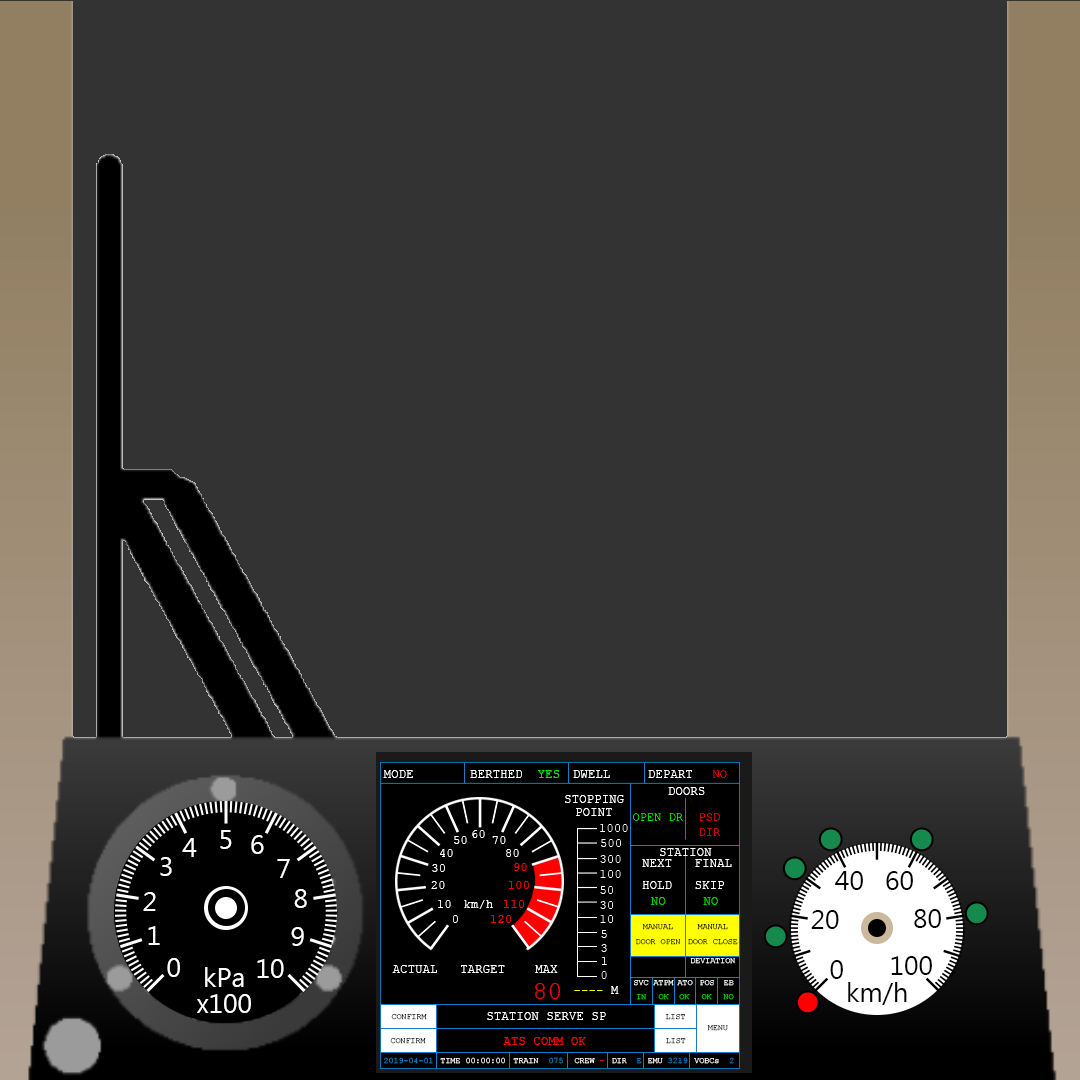
<style>
.page{position:relative;width:1080px;height:1080px;background:#333333}
.page>*{position:absolute;margin:0}
.t1{font:12.5px "CourierNewPSMT";color:#ffffff}
.t2{font:12.5px "CourierNewPSMT";color:#00ec00}
.t3{font:12.5px "CourierNewPSMT";color:#ff0000}
.t4{font:12.5px "CourierNewPSMT";color:#00d500}
.t5{font:8.3px "CourierNewPSMT"}
.t6{font:8.3px "CourierNewPSMT";color:#ffffff}
.t7{font:25px "CourierNewPSMT";color:#ff0000}
.t8{font:12.5px "CourierNewPSMT";color:#ffff00}
.t9{font:8.3px "CourierNewPSMT";color:#00d300}
.t10{font:8.3px "CourierNewPSMT";color:#000000}
.t11{font:8.3px "CourierNewPSMT";color:#1081c6}
.t12{font:8.3px "CourierNewPSMT";color:#ff0000}
</style>
<div class="page">
<p class="t1" style="left:383px;top:770px;width:30px;height:8px">MODE</p>
<p class="t1" style="left:470px;top:770px;width:89px;height:8px">BERTHED  <span class="t2">YES</span></p>
<p class="t1" style="left:573px;top:770px;width:37px;height:8px">DWELL</p>
<p class="t1" style="left:648px;top:770px;width:44px;height:8px">DEPART</p>
<p class="t1" style="left:565px;top:795px;width:59px;height:8px">STOPPING</p>
<p class="t1" style="left:668px;top:787px;width:37px;height:8px">DOORS</p>
<p class="t1" style="left:576px;top:808px;width:36px;height:8px">POINT</p>
<p class="t1" style="left:472px;top:830px;width:13px;height:8px">60</p>
<p class="t1" style="left:454px;top:836px;width:13px;height:8px">50</p>
<p class="t1" style="left:492px;top:836px;width:14px;height:8px">70</p>
<p class="t1" style="left:440px;top:849px;width:13px;height:8px">40</p>
<p class="t1" style="left:506px;top:849px;width:13px;height:8px">80</p>
<p class="t1" style="left:660px;top:848px;width:52px;height:8px">STATION</p>
<p class="t1" style="left:432px;top:864px;width:13px;height:8px">30</p>
<p class="t3" style="left:514px;top:863px;width:13px;height:8px">90</p>
<p class="t1" style="left:642px;top:859px;width:90px;height:30px">NEXT   FINAL<br>HOLD   SKIP</p>
<p class="t1" style="left:431px;top:881px;width:14px;height:8px">20</p>
<p class="t3" style="left:508px;top:881px;width:21px;height:8px">100</p>
<p class="t1" style="left:438px;top:900px;width:13px;height:8px">10</p>
<p class="t1" style="left:464px;top:900px;width:29px;height:9px">km/h</p>
<p class="t3" style="left:504px;top:900px;width:20px;height:8px">110</p>
<p class="t4" style="left:651px;top:897px;width:15px;height:8px">NO</p>
<p class="t4" style="left:703px;top:897px;width:15px;height:8px">NO</p>
<p class="t1" style="left:453px;top:915px;width:5px;height:8px">0</p>
<p class="t3" style="left:491px;top:915px;width:20px;height:8px">120</p>
<p class="t5" style="left:636px;top:924px;width:45px;height:21px;text-align:center">MANUAL<br>DOOR OPEN</p>
<p class="t5" style="left:688px;top:924px;width:50px;height:21px;text-align:center">MANUAL<br>DOOR CLOSE</p>
<p class="t1" style="left:392px;top:965px;width:166px;height:8px">ACTUAL   TARGET    MAX</p>
<p class="t6" style="left:690px;top:958px;width:45px;height:6px">DEVIATION</p>
<p class="t7" style="left:535px;top:983px;width:25px;height:16px">80</p>
<p class="t8" style="left:574px;top:986px;width:45px;height:8px">---- <span class="t1">M</span></p>
<p class="t6" style="left:634px;top:980px;width:15px;height:6px">SVC</p>
<p class="t6" style="left:653px;top:980px;width:21px;height:6px">ATPM</p>
<p class="t6" style="left:677px;top:980px;width:16px;height:6px">ATO</p>
<p class="t6" style="left:700px;top:980px;width:14px;height:6px">POS</p>
<p class="t5" style="left:724px;top:980px;width:10px;height:6px">EB</p>
<p class="t9" style="left:636px;top:994px;width:10px;height:6px">IN</p>
<p class="t9" style="left:658px;top:994px;width:11px;height:6px">OK</p>
<p class="t9" style="left:679px;top:994px;width:11px;height:6px">OK</p>
<p class="t9" style="left:701px;top:994px;width:11px;height:6px">OK</p>
<p class="t9" style="left:723px;top:994px;width:11px;height:6px">NO</p>
<p class="t5" style="left:391px;top:1014px;width:36px;height:6px">CONFIRM</p>
<p class="t1" style="left:487px;top:1012px;width:119px;height:8px">STATION SERVE SP</p>
<p class="t10" style="left:665px;top:1014px;width:20px;height:6px">LIST</p>
<p class="t5" style="left:707px;top:1025px;width:21px;height:6px">MENU</p>
<p class="t5" style="left:390px;top:1038px;width:36px;height:6px">CONFIRM</p>
<p class="t3" style="left:503px;top:1037px;width:83px;height:8px">ATS COMM OK</p>
<p class="t5" style="left:666px;top:1038px;width:20px;height:6px">LIST</p>
<p class="t11" style="left:384px;top:1057px;width:49px;height:7px">2019-04-01</p>
<p class="t6" style="left:440px;top:1057px;width:65px;height:7px">TIME 00:00:00</p>
<p class="t6" style="left:513px;top:1057px;width:50px;height:7px">TRAIN  <span class="t11">075</span></p>
<p class="t6" style="left:574px;top:1058px;width:30px;height:6px">CREW <span class="t12">-</span></p>
<p class="t5" style="left:612px;top:1058px;width:30px;height:6px">DIR  E</p>
<p class="t11" style="left:648px;top:1057px;width:40px;height:7px"><span class="t6">EMU </span>3219</p>
<p class="t6" style="left:694px;top:1057px;width:40px;height:7px">VOBCs  <span class="t11">2</span></p>
</div>
